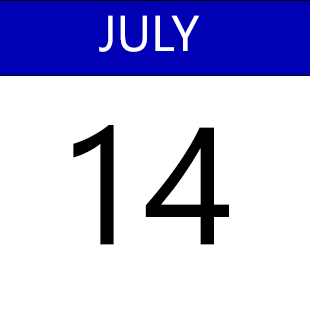
<style>
.page{position:relative;width:310px;height:310px;background:#ffffff}
.page>*{position:absolute;margin:0}
.t1{font:50px "SegoeUIHistoric";color:#ffffff}
.t2{font:166.7px "SegoeUIHistoric";color:#000000}
</style>
<div class="page">
<p class="t1" style="left:99px;top:15px;width:100px;height:37px">JULY</p>
<p class="t2" style="left:73px;top:125px;width:156px;height:120px">14</p>
</div>
